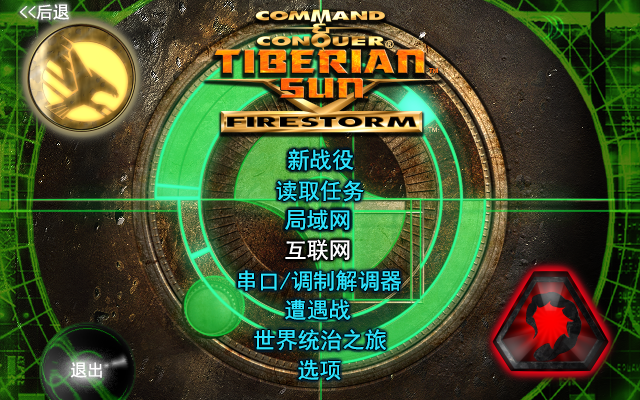
<style>
.page{position:relative;width:640px;height:400px}
.page>*{position:absolute;margin:0}
.t1{font:16.7px "SimHei";letter-spacing:0.002em;color:#ffffff}
.t2{font:22.2px "SimHei";letter-spacing:0.002em;color:#2de4ff}
.t3{font:22.2px "SimHei";color:#2de4ff}
.t4{font:22.2px "SimHei";letter-spacing:0.002em;color:#ffffff}
</style>
<div class="page">
<p class="t1" style="left:19px;top:4px;width:50px;height:16px">&lt;&lt;后退</p>
<p class="t2" style="left:288px;top:149px;width:66px;height:22px">新战役</p>
<p class="t3" style="left:288px;top:149px;width:66px;height:22px">新战役</p>
<p class="t3" style="left:276px;top:180px;width:88px;height:22px">读取任务</p>
<p class="t2" style="left:285px;top:209px;width:65px;height:21px">局域网</p>
<p class="t3" style="left:285px;top:209px;width:65px;height:21px">局域网</p>
<p class="t4" style="left:285px;top:239px;width:65px;height:22px">互联网</p>
<p class="t3" style="left:238px;top:270px;width:163px;height:21px">串口/调制解调器</p>
<p class="t3" style="left:285px;top:299px;width:66px;height:21px">遭遇战</p>
<p class="t3" style="left:254px;top:329px;width:133px;height:22px">世界统治之旅</p>
<p class="t1" style="left:70px;top:362px;width:32px;height:16px">退出</p>
<p class="t3" style="left:298px;top:359px;width:43px;height:22px">选项</p>
</div>
